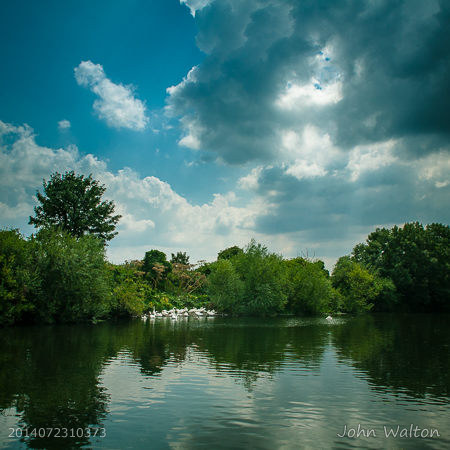
<style>
.page{position:relative;width:450px;height:450px}
.page>*{position:absolute;margin:0}
.t1{font:16px "SegoePrint";color:#aab4a9}
.t2{font:12px "Verdana"}
</style>
<div class="page">
<p class="t1" style="left:337px;top:423px;width:103px;height:15px">John Walton</p>
<p class="t2" style="left:8px;top:428px;width:98px;height:10px">2014072310373</p>
</div>
